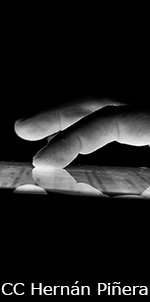
<style>
.page{position:relative;width:150px;height:302px;background:#000000}
.page>*{position:absolute;margin:0}
.t1{font:16.7px "Verdana";color:#fbf8f8}
</style>
<div class="page">
<p class="t1" style="left:1px;top:281px;width:147px;height:14px">CC Hernán Piñera</p>
</div>
